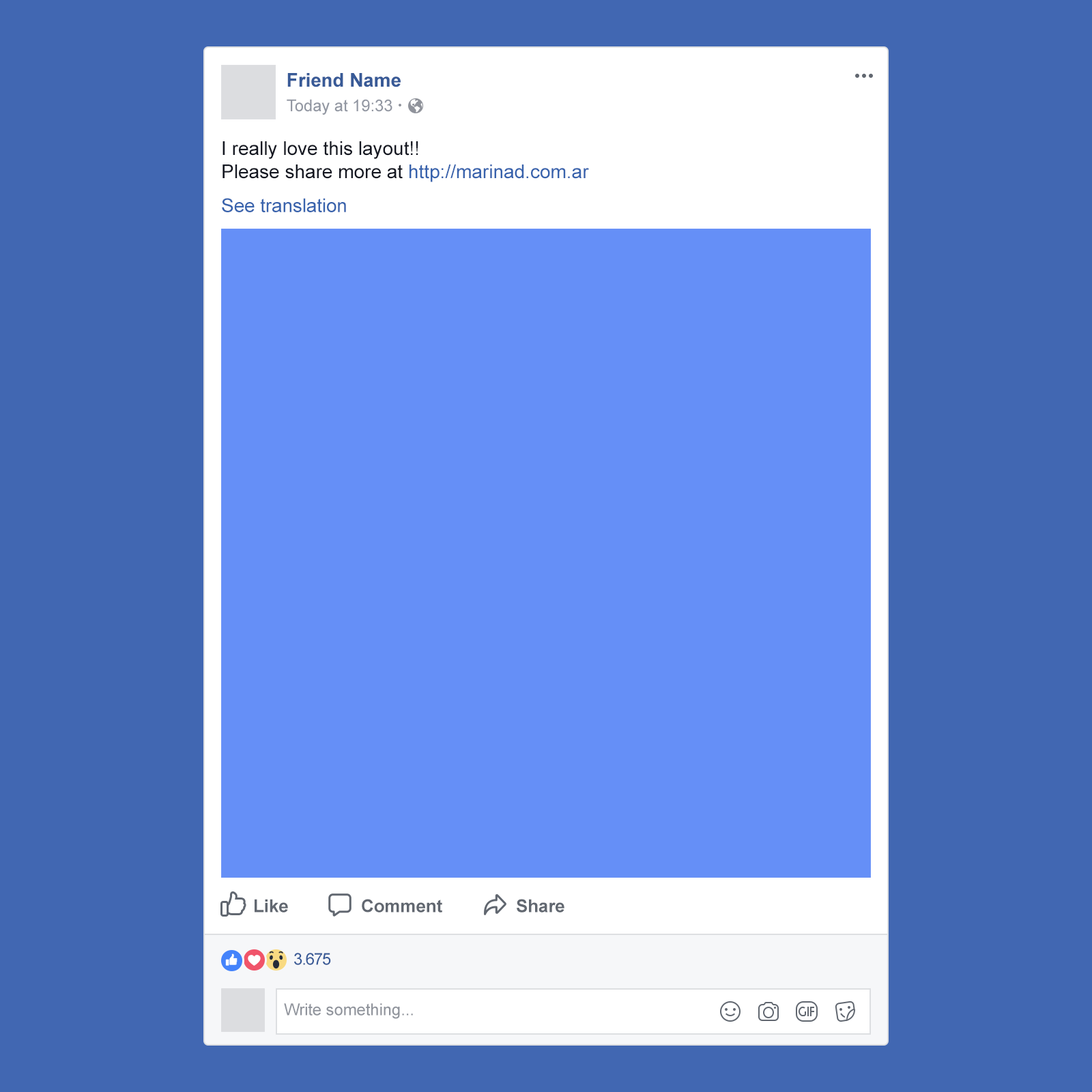
<style>
.page{position:relative;width:1092px;height:1092px;background:#4167b2}
.page>*{position:absolute;margin:0}
.t1{font:19.1px "Arial-BoldMT";letter-spacing:-0.005em;color:#385a97}
.t2{font:16.4px "ArialMT";letter-spacing:-0.005em;color:#9297a2}
.t3{font:19.1px/23.2px "ArialMT";color:#151822}
.t4{font:19.1px/23.2px "ArialMT";color:#3863ad}
.t5{font:19.1px "ArialMT";letter-spacing:-0.005em;color:#3863ad}
.t6{font:17.7px "Arial-BoldMT";letter-spacing:-0.005em;color:#616770}
.t7{font:16.4px "ArialMT";letter-spacing:-0.05em;color:#385a97}
.t8{font:16.4px "ArialMT";letter-spacing:-0.005em;color:#90949c}
</style>
<div class="page">
<p class="t1" style="left:287px;top:73px;width:114px;height:14px">Friend Name</p>
<p class="t2" style="left:287px;top:99px;width:105px;height:16px">Today at 19:33</p>
<p class="t3" style="left:222px;top:141px;width:367px;height:41px">I really love this layout!!<br>Please share more at <span class="t4">http://marinad.com.ar</span></p>
<p class="t5" style="left:222px;top:198px;width:124px;height:14px">See translation</p>
<p class="t6" style="left:255px;top:899px;width:33px;height:13px">Like</p>
<p class="t6" style="left:362px;top:899px;width:80px;height:13px">Comment</p>
<p class="t6" style="left:517px;top:899px;width:47px;height:13px">Share</p>
<p class="t7" style="left:294px;top:953px;width:37px;height:12px">3.675</p>
<p class="t8" style="left:284px;top:1003px;width:129px;height:16px">Write something...</p>
</div>
